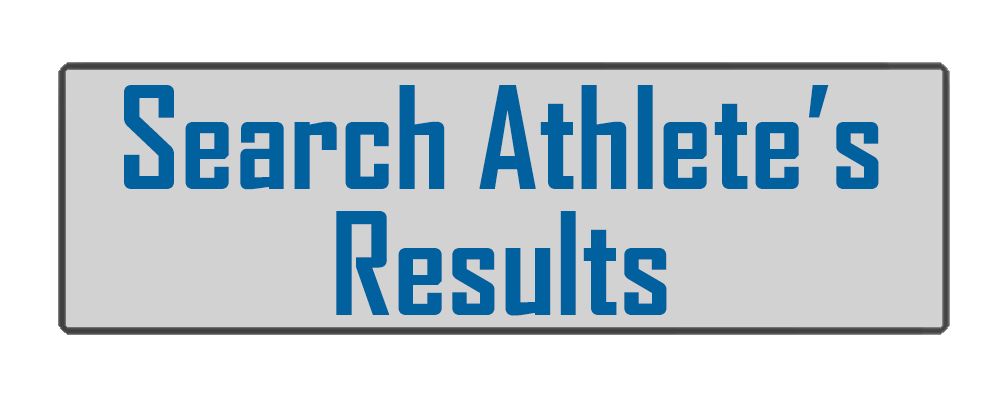
<style>
.page{position:relative;width:1000px;height:400px;background:#d2d2d2}
.page>*{position:absolute;margin:0}
.t1{font:136px/126px "AgencyFB-Bold";color:#00619e}
</style>
<div class="page">
<p class="t1" style="left:124px;top:85px;width:755px;height:231px;text-align:center">Search Athlete’s<br>Results</p>
</div>
